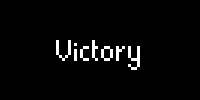
<style>
.page{position:relative;width:200px;height:100px;background:#000000}
.page>*{position:absolute;margin:0}
.t1{font:48px "Thintel";color:#ffffff}
</style>
<div class="page">
<p class="t1" style="left:56px;top:40px;width:84px;height:30px">Victory</p>
</div>
